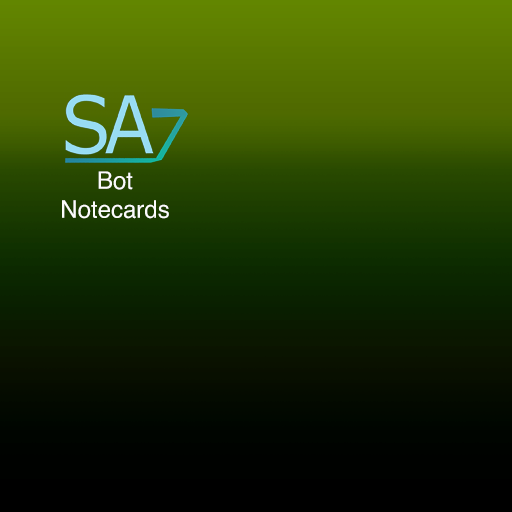
<style>
.page{position:relative;width:512px;height:512px}
.page>*{position:absolute;margin:0}
.t1{font:24px "Helvetica";color:#fcfcfc}
</style>
<div class="page">
<p class="t1" style="left:62px;top:171px;width:107px;height:48px;text-align:center">Bot<br>Notecards</p>
</div>
